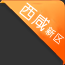
<style>
.page{position:relative;width:65px;height:65px;background:#333333}
.page>*{position:absolute;margin:0}
.t1{font:16px "CTZhongYuanSJ";letter-spacing:0.03em;color:#ffffff}
.t2{font:10px "CTZhongYuanSJ";letter-spacing:0.03em;color:#ffffff}
</style>
<div class="page">
<p class="t1" style="left:19px;top:2px;width:46px;height:43px;rotate:39deg">西咸<span class="t2">新区</span></p>
</div>
